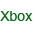
<style>
.page{position:relative;width:35px;height:35px;background:#ffffff}
.page>*{position:absolute;margin:0}
.t1{font:14px "ArialMT";color:#086a16}
</style>
<div class="page">
<p class="t1" style="left:0px;top:11px;width:32px;height:10px">Xbox</p>
</div>
